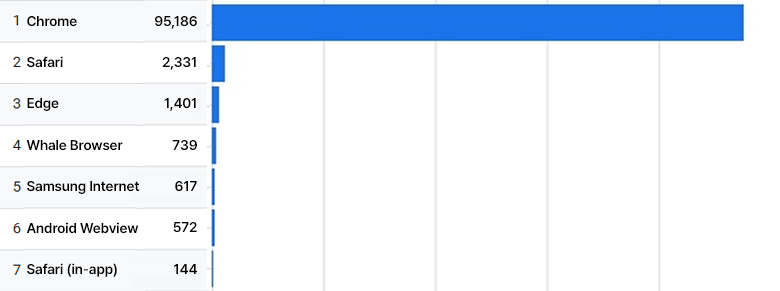
<style>
.page{position:relative;width:780px;height:291px;background:#ffffff}
.page>*{position:absolute;margin:0}
.t1{font:14px "Pretendard-SemiBold";letter-spacing:-0.01em;color:#000000}
</style>
<div class="page">
<p class="t1" style="left:27px;top:16px;width:50px;height:11px">Chrome</p>
<p class="t1" style="left:155px;top:16px;width:42px;height:13px">95,186</p>
<p class="t1" style="left:27px;top:56px;width:36px;height:12px">Safari</p>
<p class="t1" style="left:162px;top:57px;width:34px;height:13px">2,331</p>
<p class="t1" style="left:27px;top:98px;width:32px;height:13px">Edge</p>
<p class="t1" style="left:164px;top:98px;width:32px;height:13px">1,401</p>
<p class="t1" style="left:26px;top:140px;width:97px;height:11px">Whale Browser</p>
<p class="t1" style="left:172px;top:140px;width:25px;height:11px">739</p>
<p class="t1" style="left:27px;top:181px;width:113px;height:13px">Samsung Internet</p>
<p class="t1" style="left:175px;top:181px;width:22px;height:11px">617</p>
<p class="t1" style="left:26px;top:222px;width:113px;height:12px">Android Webview</p>
<p class="t1" style="left:173px;top:222px;width:24px;height:11px">572</p>
<p class="t1" style="left:27px;top:263px;width:90px;height:14px">Safari (in-app)</p>
<p class="t1" style="left:174px;top:264px;width:23px;height:10px">144</p>
</div>
